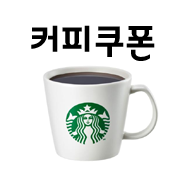
<style>
.page{position:relative;width:180px;height:180px;background:#ffffff}
.page>*{position:absolute;margin:0}
.t1{font:40px "ThecircleB";color:#000000}
</style>
<div class="page">
<p class="t1" style="left:31px;top:25px;width:124px;height:36px">커피쿠폰</p>
</div>
